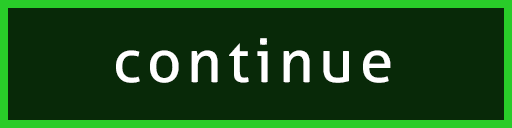
<style>
.page{position:relative;width:512px;height:128px;background:#082908}
.page>*{position:absolute;margin:0}
.t1{font:60px "Aller-Regular";letter-spacing:0.1em;color:#ffffff}
</style>
<div class="page">
<p class="t1" style="left:116px;top:38px;width:275px;height:45px">continue</p>
</div>
